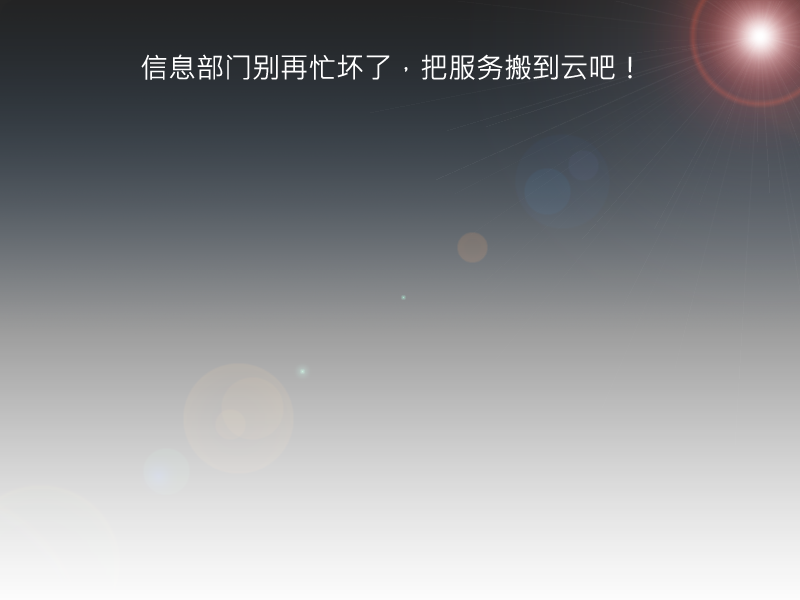
<style>
.page{position:relative;width:800px;height:600px}
.page>*{position:absolute;margin:0}
.t1{font:28px "MicrosoftJhengHeiRegular";color:#ffffff}
</style>
<div class="page">
<p class="t1" style="left:141px;top:54px;width:491px;height:26px">信息部门别再忙坏了，把服务搬到云吧！</p>
</div>
